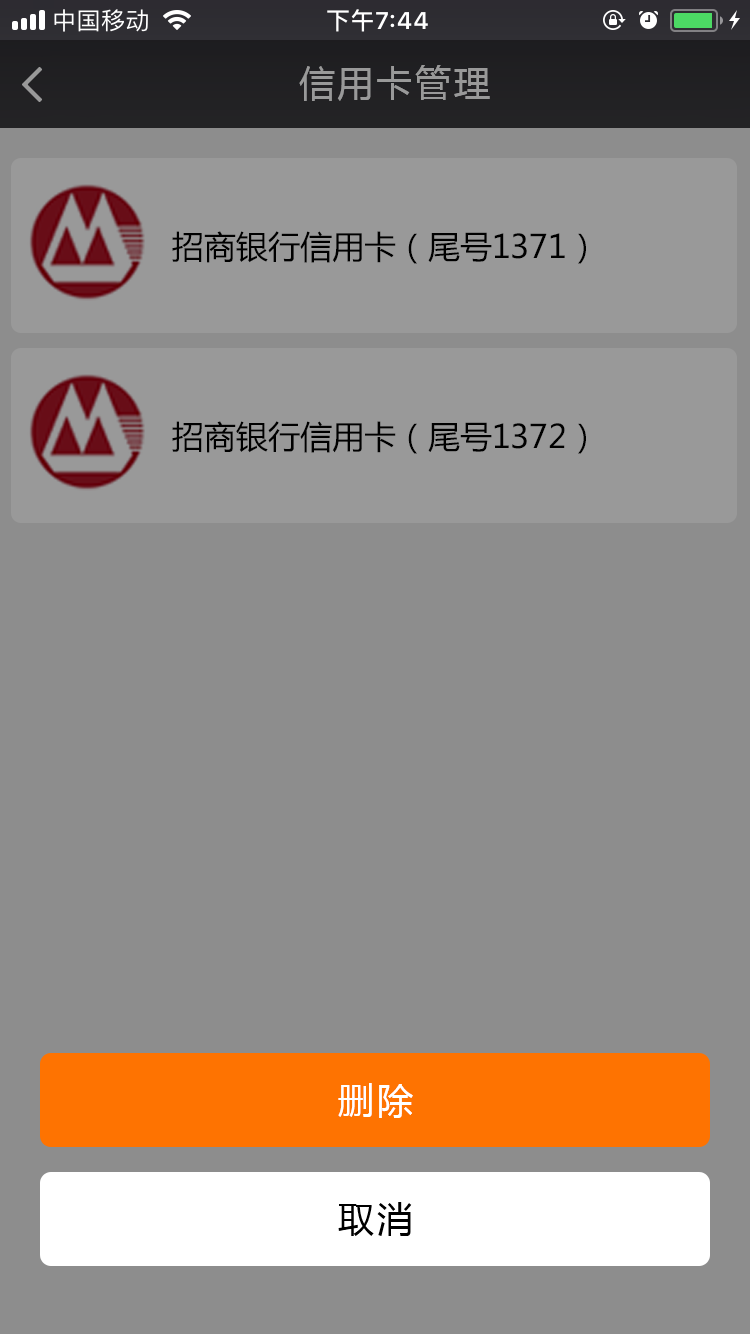
<style>
.page{position:relative;width:750px;height:1334px;background:#8d8d8d}
.page>*{position:absolute;margin:0}
.t1{font:36px "MicrosoftYaHei";letter-spacing:0.08em;color:#999999}
.t2{font:32px "MicrosoftYaHei";color:#000000}
.t3{font:36px "MicrosoftYaHei";letter-spacing:0.08em;color:#ffffff}
.t4{font:36px "MicrosoftYaHei";letter-spacing:0.08em;color:#000000}
</style>
<div class="page">
<p class="t1" style="left:299px;top:65px;width:191px;height:36px">信用卡管理</p>
<p class="t2" style="left:172px;top:231px;width:414px;height:33px">招商银行信用卡（尾号1371）</p>
<p class="t2" style="left:172px;top:421px;width:414px;height:33px">招商银行信用卡（尾号1372）</p>
<p class="t3" style="left:338px;top:1083px;width:75px;height:35px">删除</p>
<p class="t4" style="left:338px;top:1202px;width:74px;height:34px">取消</p>
</div>
